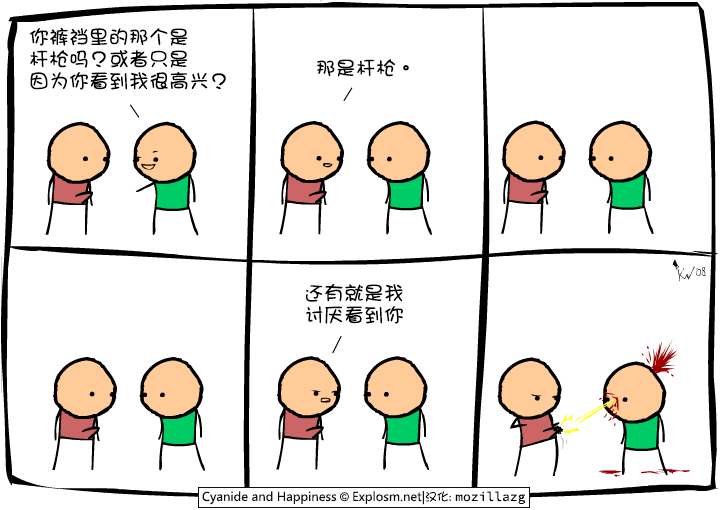
<style>
.page{position:relative;width:720px;height:510px;background:#ffffff}
.page>*{position:absolute;margin:0}
.t1{font:20px/22px "DFGirl";color:#000000}
.t2{font:20px "DFGirl";color:#000000}
</style>
<div class="page">
<p class="t1" style="left:29px;top:27px;width:197px;height:63px">你裤裆里的那个是<br>杆枪吗？或者只是<br>因为你看到我很高兴？</p>
<p class="t2" style="left:317px;top:59px;width:92px;height:18px">那是杆枪。</p>
<p class="t1" style="left:305px;top:283px;width:98px;height:41px">还有就是我<br>讨厌看到你</p>
</div>
